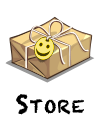
<style>
.page{position:relative;width:100px;height:120px;background:#ffffff}
.page>*{position:absolute;margin:0}
.t1{font:24px "Chalkduster";letter-spacing:0.05em;color:#000000;font-variant:small-caps;font-weight:bold}
</style>
<div class="page">
<p class="t1" style="left:16px;top:94px;width:68px;height:21px">Store</p>
</div>
